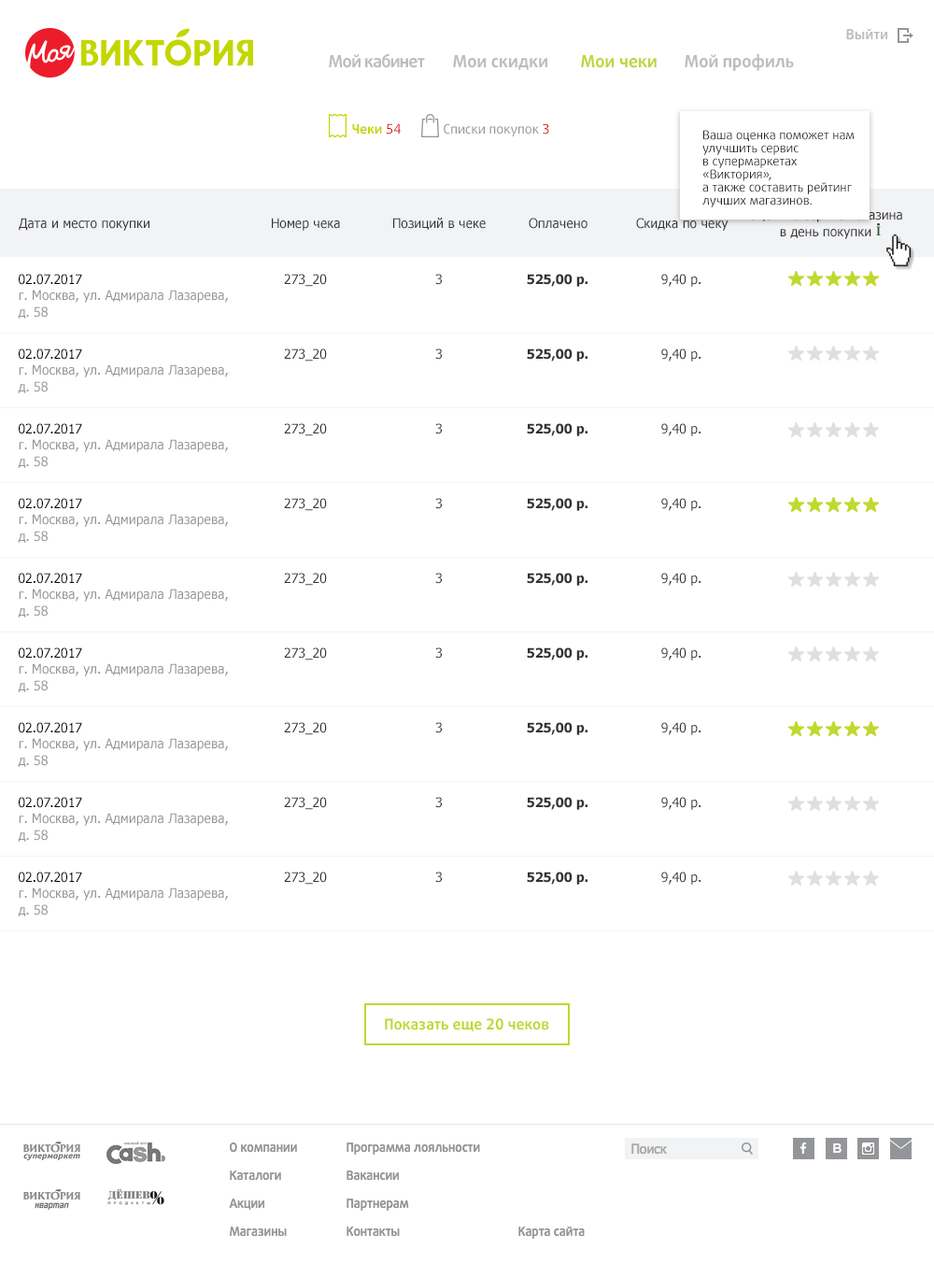
<style>
.page{position:relative;width:934px;height:1277px;background:#ffffff}
.page>*{position:absolute;margin:0}
.t1{font:14px "DaxlineOffcPro-Bold";color:#bcbdc0}
.t2{font:16.8px "DaxlineOffcPro-Bold";letter-spacing:-0.04em;color:#bcbdc0}
.t3{font:16.8px "DaxlineOffcPro-Bold";color:#bcbdc0}
.t4{font:16.8px "DaxlineOffcPro-Bold";color:#c1d43c}
.t5{font:13.1px "DaxlineOffcPro-Bold";color:#c4d600}
.t6{font:13.1px "DaxlineOffcPro";color:#d6090b}
.t7{font:13.1px "DaxlineOffcPro";color:#939598}
.t8{font:12.1px/13.1px "DaxlineOffcPro";color:#252525}
.t9{font:13.1px/16.8px "Tahoma"}
.t10{font:13.1px "Tahoma";color:#333333}
.t11{font:13.1px "Tahoma";color:#000000}
.t12{font:13.1px "Tahoma-Bold";color:#333333}
.t13{font:13.1px/16.8px "Tahoma";color:#939597}
.t14{font:14.9px "DaxlineOffcPro-Bold";color:#c1d82f}
</style>
<div class="page">
<p class="t1" style="left:846px;top:28px;width:41px;height:12px">Выйти</p>
<p class="t2" style="left:329px;top:53px;width:96px;height:15px">Мой кабинет</p>
<p class="t3" style="left:685px;top:53px;width:109px;height:18px">Мой профиль</p>
<p class="t3" style="left:453px;top:55px;width:94px;height:15px">Мои скидки</p>
<p class="t4" style="left:581px;top:55px;width:76px;height:13px">Мои чеки</p>
<p class="t5" style="left:352px;top:123px;width:49px;height:11px">Чеки <span class="t6">54</span></p>
<p class="t7" style="left:444px;top:123px;width:105px;height:13px">Списки покупок <span class="t6">3</span></p>
<p class="t8" style="left:702px;top:130px;width:153px;height:77px">Ваша оценка поможет нам улучшить сервис<br>в супермаркетах «Виктория»,<br>а также составить рейтинг лучших магазинов.</p>
<p class="t9" style="left:748px;top:209px;width:154px;height:30px;text-align:center">Оцените сервис магазина<br>в день покупки</p>
<p class="t10" style="left:19px;top:218px;width:130px;height:13px">Дата и место покупки</p>
<p class="t10" style="left:272px;top:218px;width:68px;height:13px">Номер чека</p>
<p class="t10" style="left:393px;top:218px;width:93px;height:12px">Позиций в чеке</p>
<p class="t10" style="left:529px;top:218px;width:58px;height:11px">Оплачено</p>
<p class="t10" style="left:636px;top:218px;width:92px;height:13px">Скидка по чеку</p>
<p class="t11" style="left:19px;top:274px;width:63px;height:11px">02.07.2017</p>
<p class="t10" style="left:284px;top:274px;width:43px;height:13px">273_20</p>
<p class="t10" style="left:435px;top:274px;width:7px;height:11px">3</p>
<p class="t12" style="left:527px;top:274px;width:60px;height:13px">525,00 р.</p>
<p class="t10" style="left:661px;top:274px;width:39px;height:13px">9,40 р.</p>
<p class="t13" style="left:18px;top:290px;width:210px;height:28px">г. Москва, ул. Адмирала Лазарева,<br>д. 58</p>
<p class="t11" style="left:19px;top:348px;width:63px;height:12px">02.07.2017</p>
<p class="t10" style="left:284px;top:348px;width:43px;height:13px">273_20</p>
<p class="t10" style="left:435px;top:348px;width:7px;height:12px">3</p>
<p class="t12" style="left:527px;top:348px;width:60px;height:13px">525,00 р.</p>
<p class="t10" style="left:661px;top:348px;width:39px;height:13px">9,40 р.</p>
<p class="t13" style="left:18px;top:364px;width:210px;height:29px">г. Москва, ул. Адмирала Лазарева,<br>д. 58</p>
<p class="t11" style="left:19px;top:423px;width:63px;height:11px">02.07.2017</p>
<p class="t10" style="left:284px;top:423px;width:43px;height:13px">273_20</p>
<p class="t10" style="left:435px;top:423px;width:7px;height:11px">3</p>
<p class="t12" style="left:527px;top:423px;width:60px;height:13px">525,00 р.</p>
<p class="t10" style="left:661px;top:423px;width:39px;height:13px">9,40 р.</p>
<p class="t13" style="left:18px;top:439px;width:210px;height:29px">г. Москва, ул. Адмирала Лазарева,<br>д. 58</p>
<p class="t11" style="left:19px;top:498px;width:63px;height:11px">02.07.2017</p>
<p class="t10" style="left:284px;top:498px;width:43px;height:13px">273_20</p>
<p class="t10" style="left:435px;top:498px;width:7px;height:11px">3</p>
<p class="t12" style="left:527px;top:498px;width:60px;height:13px">525,00 р.</p>
<p class="t10" style="left:661px;top:498px;width:39px;height:13px">9,40 р.</p>
<p class="t13" style="left:18px;top:514px;width:210px;height:29px">г. Москва, ул. Адмирала Лазарева,<br>д. 58</p>
<p class="t11" style="left:19px;top:573px;width:63px;height:11px">02.07.2017</p>
<p class="t10" style="left:284px;top:573px;width:43px;height:13px">273_20</p>
<p class="t10" style="left:435px;top:573px;width:7px;height:11px">3</p>
<p class="t12" style="left:527px;top:573px;width:60px;height:13px">525,00 р.</p>
<p class="t10" style="left:661px;top:573px;width:39px;height:13px">9,40 р.</p>
<p class="t13" style="left:18px;top:588px;width:210px;height:29px">г. Москва, ул. Адмирала Лазарева,<br>д. 58</p>
<p class="t11" style="left:19px;top:647px;width:63px;height:11px">02.07.2017</p>
<p class="t10" style="left:284px;top:647px;width:43px;height:13px">273_20</p>
<p class="t10" style="left:435px;top:647px;width:7px;height:11px">3</p>
<p class="t12" style="left:527px;top:647px;width:60px;height:13px">525,00 р.</p>
<p class="t10" style="left:661px;top:647px;width:39px;height:13px">9,40 р.</p>
<p class="t13" style="left:18px;top:663px;width:210px;height:29px">г. Москва, ул. Адмирала Лазарева,<br>д. 58</p>
<p class="t11" style="left:19px;top:722px;width:63px;height:11px">02.07.2017</p>
<p class="t10" style="left:284px;top:722px;width:43px;height:13px">273_20</p>
<p class="t10" style="left:435px;top:722px;width:7px;height:11px">3</p>
<p class="t12" style="left:527px;top:722px;width:60px;height:13px">525,00 р.</p>
<p class="t10" style="left:661px;top:722px;width:39px;height:13px">9,40 р.</p>
<p class="t13" style="left:18px;top:738px;width:210px;height:29px">г. Москва, ул. Адмирала Лазарева,<br>д. 58</p>
<p class="t11" style="left:19px;top:797px;width:63px;height:11px">02.07.2017</p>
<p class="t10" style="left:284px;top:797px;width:43px;height:13px">273_20</p>
<p class="t10" style="left:435px;top:797px;width:7px;height:11px">3</p>
<p class="t12" style="left:527px;top:797px;width:60px;height:13px">525,00 р.</p>
<p class="t10" style="left:661px;top:797px;width:39px;height:13px">9,40 р.</p>
<p class="t13" style="left:18px;top:813px;width:210px;height:29px">г. Москва, ул. Адмирала Лазарева,<br>д. 58</p>
<p class="t11" style="left:19px;top:871px;width:63px;height:12px">02.07.2017</p>
<p class="t10" style="left:284px;top:871px;width:43px;height:13px">273_20</p>
<p class="t10" style="left:435px;top:871px;width:7px;height:12px">3</p>
<p class="t12" style="left:527px;top:871px;width:60px;height:13px">525,00 р.</p>
<p class="t10" style="left:661px;top:871px;width:39px;height:13px">9,40 р.</p>
<p class="t13" style="left:18px;top:887px;width:210px;height:29px">г. Москва, ул. Адмирала Лазарева,<br>д. 58</p>
<p class="t14" style="left:385px;top:1018px;width:164px;height:14px">Показать еще 20 чеков</p>
</div>
